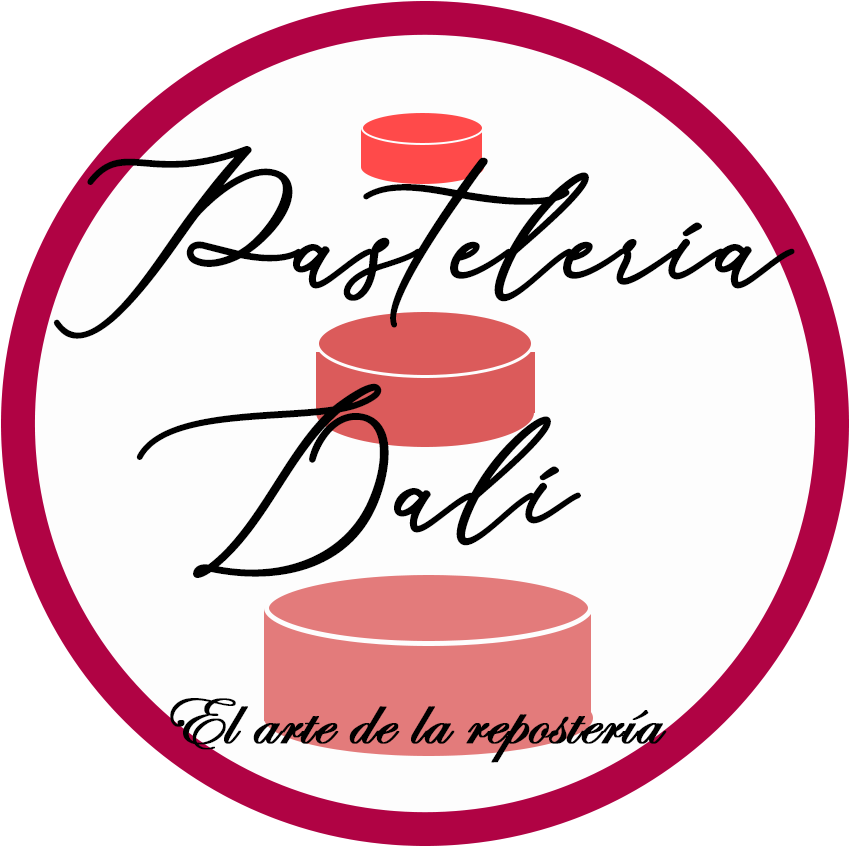
<style>
.page{position:relative;width:850px;height:850px;background:#fdfdfd}
.page>*{position:absolute;margin:0}
.t1{font:150px "Aerotis";color:#000000;font-weight:bold}
.t2{font:72px "EdwardianScriptITC";color:#000000;font-weight:bold}
</style>
<div class="page">
<p class="t1" style="left:53px;top:146px;width:742px;height:193px">Pastelería</p>
<p class="t1" style="left:136px;top:383px;width:445px;height:195px">Dalí</p>
<p class="t2" style="left:170px;top:698px;width:497px;height:65px">El arte de la repostería</p>
</div>
